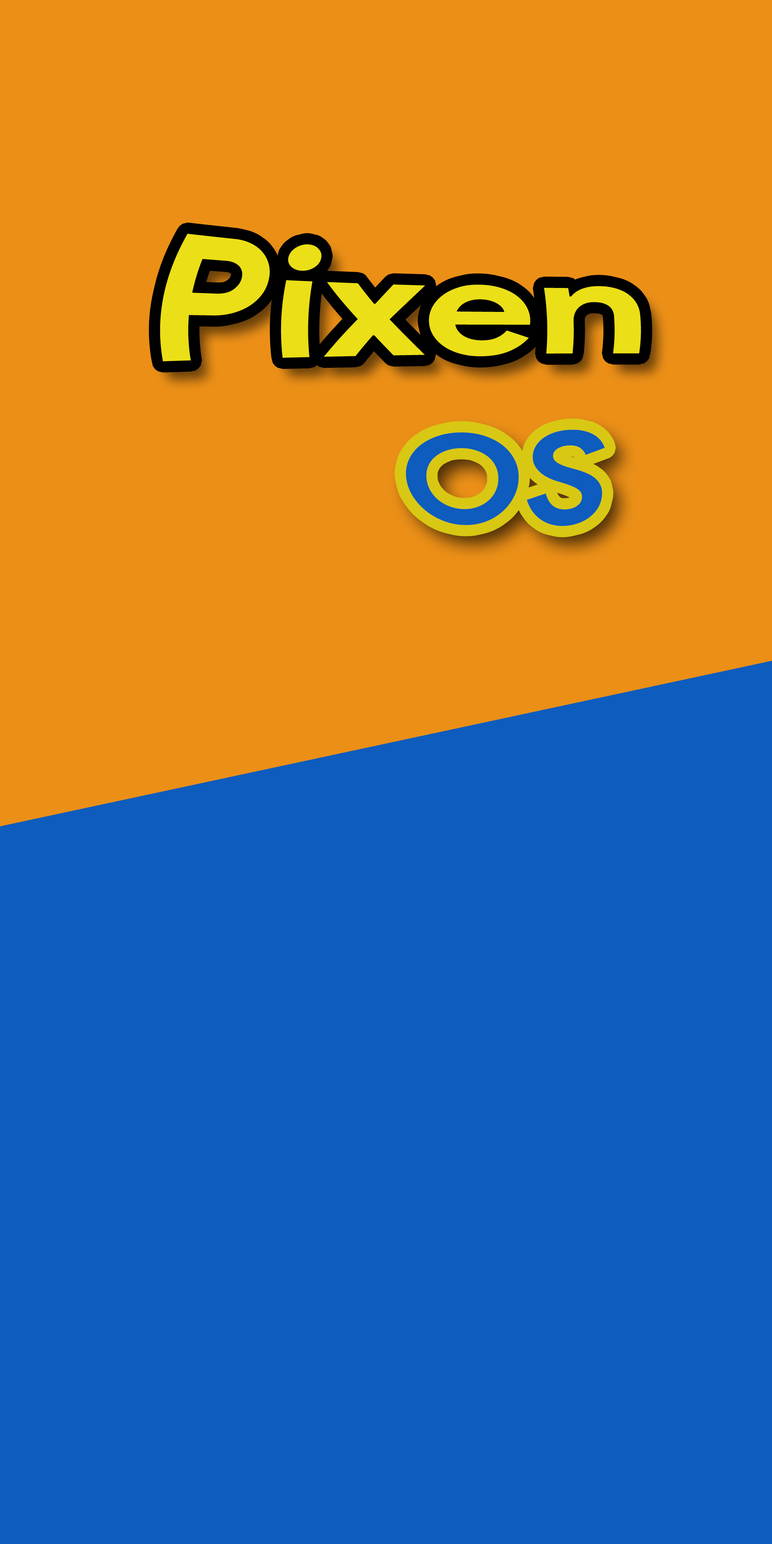
<style>
.page{position:relative;width:772px;height:1544px;background:#0d5cbe}
.page>*{position:absolute;margin:0}
.t1{font:173.7px "ProductSans-Bold";color:#ebdf17}
.t2{font:135.1px "ProductSans-Bold";color:#0d5cbe}
</style>
<div class="page">
<p class="t1" style="left:160px;top:234px;width:481px;height:127px">Pixen</p>
<p class="t2" style="left:406px;top:430px;width:199px;height:96px">OS</p>
</div>
